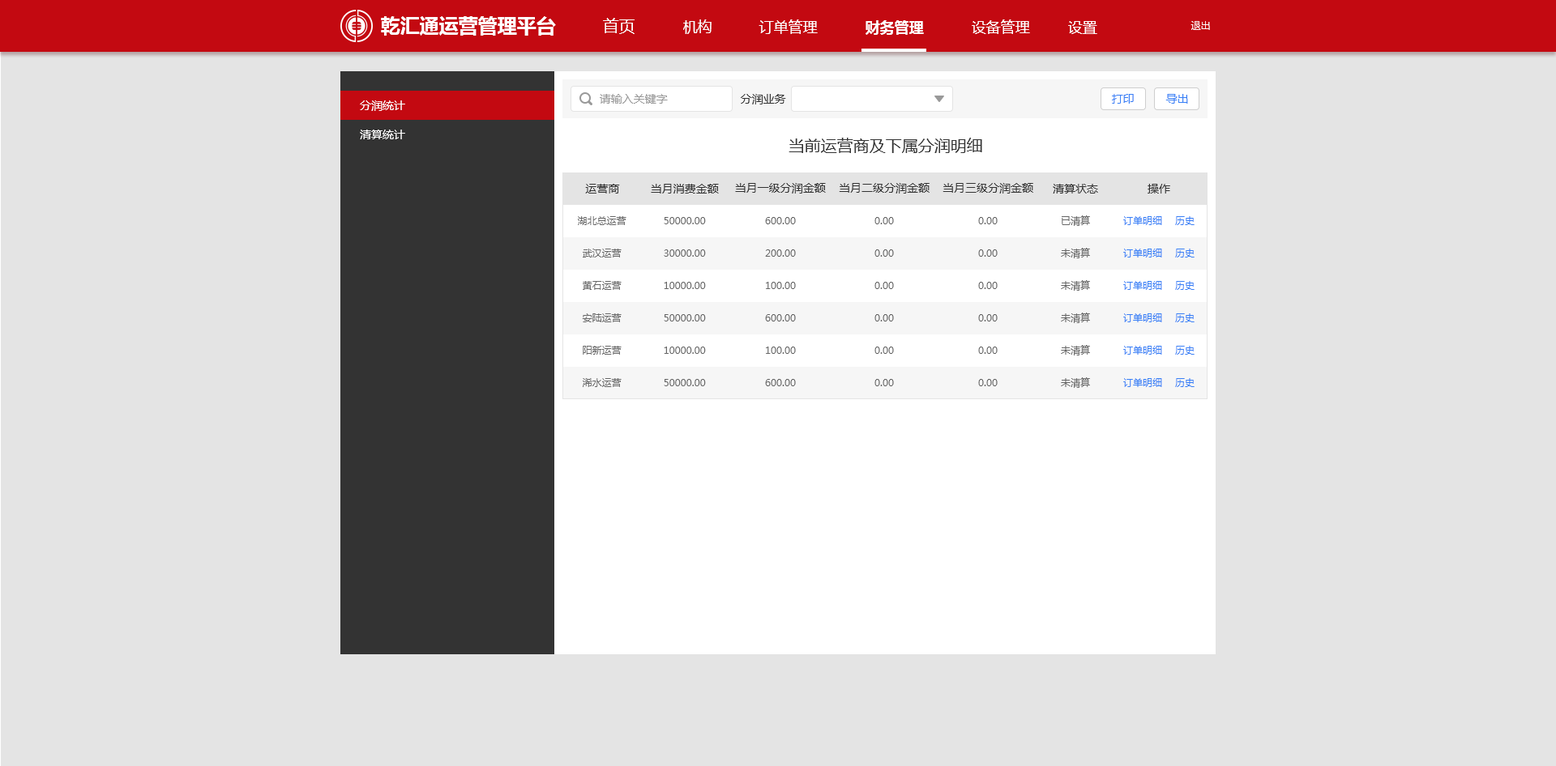
<style>
.page{position:relative;width:1556px;height:766px;background:#e4e4e4}
.page>*{position:absolute;margin:0}
.t1{font:19.4px "MicrosoftYaHei-Bold";color:#ffffff}
.t2{font:16.2px "MicrosoftYaHei";color:#ffffff}
.t3{font:14.6px "MicrosoftYaHei";color:#ffffff}
.t4{font:14.6px "MicrosoftYaHei-Bold";color:#ffffff}
.t5{font:9.7px "MicrosoftYaHei";color:#ffffff}
.t6{font:11.3px "MicrosoftYaHei";color:#ffffff}
.t7{font:11.3px "MicrosoftYaHei";color:#999999}
.t8{font:11.3px "MicrosoftYaHei";color:#333333}
.t9{font:11.3px "MicrosoftYaHei";color:#3880f6}
.t10{font:16.2px "MicrosoftYaHei";color:#333333}
.t11{font:9.7px "MicrosoftYaHei";color:#666666}
.t12{font:9.7px "MicrosoftYaHei";color:#3880f6}
</style>
<div class="page">
<p class="t1" style="left:381px;top:16px;width:175px;height:20px">乾汇通运营管理平台</p>
<p class="t2" style="left:603px;top:18px;width:31px;height:16px">首页</p>
<p class="t3" style="left:683px;top:19px;width:28px;height:15px">机构</p>
<p class="t3" style="left:758px;top:19px;width:60px;height:15px">订单管理</p>
<p class="t4" style="left:865px;top:20px;width:59px;height:15px">财务管理</p>
<p class="t3" style="left:971px;top:19px;width:59px;height:15px">设备管理</p>
<p class="t3" style="left:1068px;top:21px;width:29px;height:13px">设置</p>
<p class="t5" style="left:1190px;top:21px;width:20px;height:9px">退出</p>
<p class="t6" style="left:360px;top:100px;width:45px;height:11px">分润统计</p>
<p class="t7" style="left:600px;top:94px;width:68px;height:10px">请输入关键字</p>
<p class="t8" style="left:741px;top:94px;width:45px;height:11px">分润业务</p>
<p class="t9" style="left:1112px;top:94px;width:22px;height:10px">打印</p>
<p class="t9" style="left:1165px;top:94px;width:23px;height:10px">导出</p>
<p class="t6" style="left:360px;top:130px;width:45px;height:9px">清算统计</p>
<p class="t10" style="left:788px;top:138px;width:194px;height:15px">当前运营商及下属分润明细</p>
<p class="t8" style="left:585px;top:184px;width:35px;height:10px">运营商</p>
<p class="t8" style="left:651px;top:184px;width:68px;height:10px">当月消费金额</p>
<p class="t8" style="left:735px;top:183px;width:91px;height:11px">当月一级分润金额</p>
<p class="t8" style="left:839px;top:183px;width:90px;height:11px">当月二级分润金额</p>
<p class="t8" style="left:942px;top:183px;width:91px;height:11px">当月三级分润金额</p>
<p class="t8" style="left:1053px;top:184px;width:45px;height:10px">清算状态</p>
<p class="t8" style="left:1147px;top:184px;width:23px;height:10px">操作</p>
<p class="t11" style="left:578px;top:216px;width:48px;height:9px">湖北总运营</p>
<p class="t11" style="left:664px;top:217px;width:42px;height:7px">50000.00</p>
<p class="t11" style="left:765px;top:217px;width:31px;height:7px">600.00</p>
<p class="t11" style="left:874px;top:217px;width:20px;height:7px">0.00</p>
<p class="t11" style="left:978px;top:217px;width:19px;height:7px">0.00</p>
<p class="t11" style="left:1061px;top:216px;width:29px;height:10px">已清算</p>
<p class="t12" style="left:1123px;top:216px;width:39px;height:9px">订单明细</p>
<p class="t12" style="left:1175px;top:216px;width:19px;height:9px">历史</p>
<p class="t11" style="left:583px;top:249px;width:38px;height:9px">武汉运营</p>
<p class="t11" style="left:664px;top:250px;width:42px;height:7px">30000.00</p>
<p class="t11" style="left:765px;top:250px;width:31px;height:7px">200.00</p>
<p class="t11" style="left:874px;top:250px;width:20px;height:7px">0.00</p>
<p class="t11" style="left:978px;top:250px;width:19px;height:7px">0.00</p>
<p class="t11" style="left:1061px;top:248px;width:29px;height:10px">未清算</p>
<p class="t12" style="left:1123px;top:249px;width:39px;height:9px">订单明细</p>
<p class="t12" style="left:1175px;top:249px;width:19px;height:9px">历史</p>
<p class="t11" style="left:583px;top:281px;width:38px;height:9px">黄石运营</p>
<p class="t11" style="left:664px;top:282px;width:42px;height:7px">10000.00</p>
<p class="t11" style="left:766px;top:282px;width:30px;height:7px">100.00</p>
<p class="t11" style="left:874px;top:282px;width:20px;height:7px">0.00</p>
<p class="t11" style="left:978px;top:282px;width:19px;height:7px">0.00</p>
<p class="t11" style="left:1061px;top:280px;width:29px;height:11px">未清算</p>
<p class="t12" style="left:1123px;top:281px;width:39px;height:9px">订单明细</p>
<p class="t12" style="left:1175px;top:281px;width:19px;height:9px">历史</p>
<p class="t11" style="left:582px;top:314px;width:39px;height:8px">安陆运营</p>
<p class="t11" style="left:664px;top:314px;width:42px;height:8px">50000.00</p>
<p class="t11" style="left:765px;top:314px;width:31px;height:8px">600.00</p>
<p class="t11" style="left:874px;top:314px;width:20px;height:8px">0.00</p>
<p class="t11" style="left:978px;top:314px;width:19px;height:8px">0.00</p>
<p class="t11" style="left:1061px;top:313px;width:29px;height:10px">未清算</p>
<p class="t12" style="left:1123px;top:314px;width:39px;height:8px">订单明细</p>
<p class="t12" style="left:1175px;top:314px;width:19px;height:8px">历史</p>
<p class="t11" style="left:583px;top:346px;width:38px;height:9px">阳新运营</p>
<p class="t11" style="left:664px;top:347px;width:42px;height:7px">10000.00</p>
<p class="t11" style="left:766px;top:347px;width:30px;height:7px">100.00</p>
<p class="t11" style="left:874px;top:347px;width:20px;height:7px">0.00</p>
<p class="t11" style="left:978px;top:347px;width:19px;height:7px">0.00</p>
<p class="t11" style="left:1061px;top:345px;width:29px;height:11px">未清算</p>
<p class="t12" style="left:1123px;top:346px;width:39px;height:9px">订单明细</p>
<p class="t12" style="left:1175px;top:346px;width:19px;height:9px">历史</p>
<p class="t11" style="left:1061px;top:378px;width:29px;height:10px">未清算</p>
<p class="t11" style="left:583px;top:378px;width:38px;height:9px">浠水运营</p>
<p class="t11" style="left:664px;top:379px;width:42px;height:7px">50000.00</p>
<p class="t11" style="left:765px;top:379px;width:31px;height:7px">600.00</p>
<p class="t11" style="left:874px;top:379px;width:20px;height:7px">0.00</p>
<p class="t11" style="left:978px;top:379px;width:19px;height:7px">0.00</p>
<p class="t12" style="left:1123px;top:378px;width:39px;height:9px">订单明细</p>
<p class="t12" style="left:1175px;top:378px;width:19px;height:9px">历史</p>
</div>
